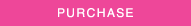
<style>
.page{position:relative;width:191px;height:26px;background:#ee4799}
.page>*{position:absolute;margin:0}
.t1{font:12px "HelveticaLTStd-Roman";letter-spacing:0.1em;color:#ffffff}
</style>
<div class="page">
<p class="t1" style="left:58px;top:8px;width:75px;height:10px">PURCHASE</p>
</div>
